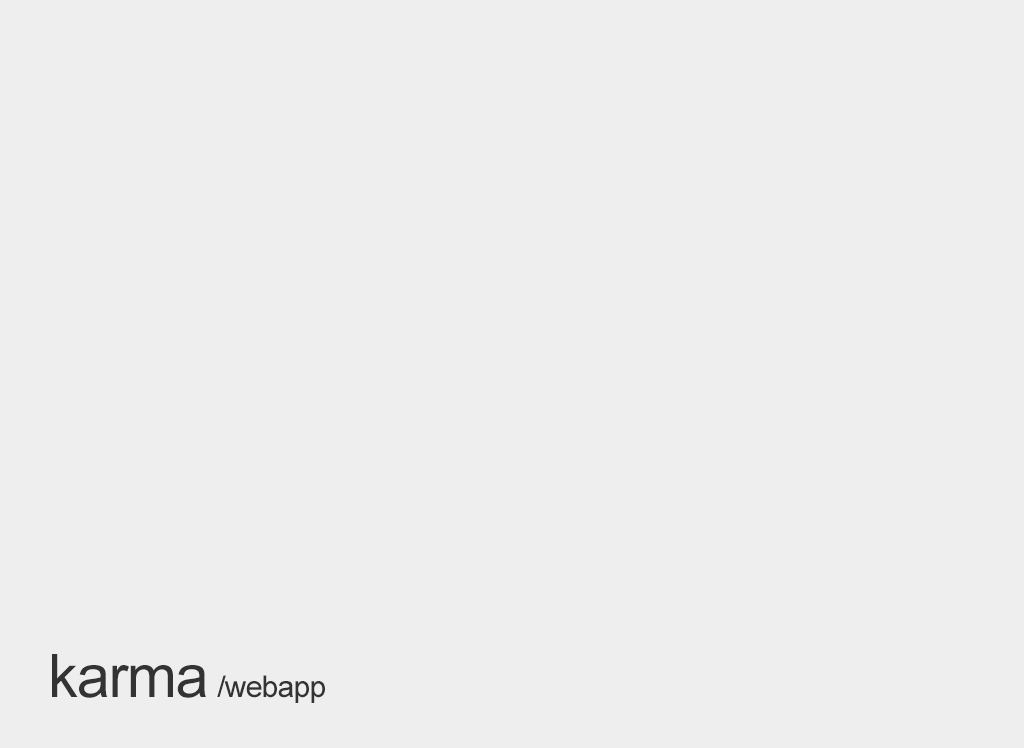
<style>
.page{position:relative;width:1024px;height:748px;background:#eeeeee}
.page>*{position:absolute;margin:0}
.t1{font:60px "ArialMT";letter-spacing:-0.025em;color:#333333}
.t2{font:30px "ArialMT";letter-spacing:-0.025em;color:#333333}
</style>
<div class="page">
<p class="t1" style="left:52px;top:654px;width:154px;height:44px">karma</p>
<p class="t2" style="left:217px;top:675px;width:108px;height:28px">/webapp</p>
</div>
